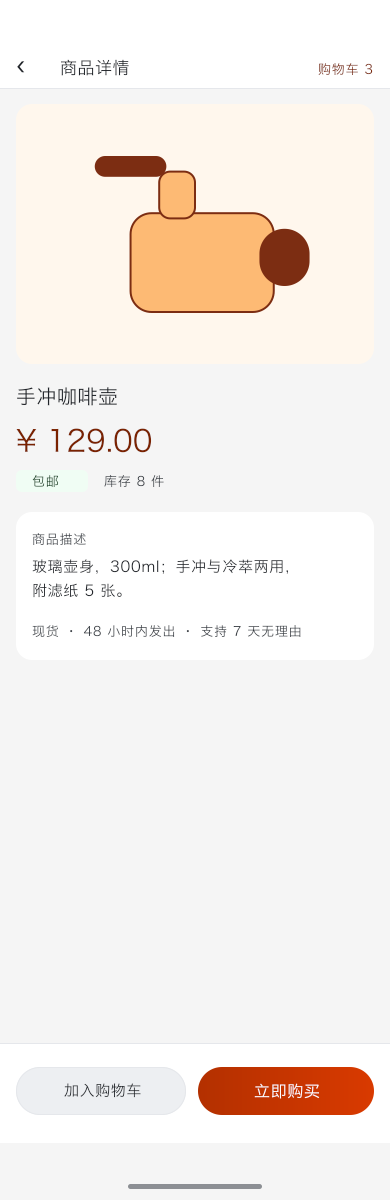
<style>
.page{position:relative;width:390px;height:1200px;background:#f5f5f5}
.page>*{position:absolute;margin:0}
.t1{font:24px "HiraginoSansGB-Regular";letter-spacing:0.022em;color:#1f2329}
.t2{font:17px "HiraginoSansGB-Regular";letter-spacing:0.03em;color:#1f2329}
.t3{font:13px "HiraginoSansGB-Regular";letter-spacing:0.06em;color:#7f2e12}
.t4{font:20px "HiraginoSansGB-Regular";letter-spacing:0.024em;color:#1f2329}
.t5{font:30px "HiraginoSansGB-Regular";color:#7a2200}
.t6{font:13px "HiraginoSansGB-Regular";letter-spacing:0.06em}
.t7{font:13px "HiraginoSansGB-Regular";letter-spacing:0.06em;color:#464b50}
.t8{font:15px "HiraginoSansGB-Regular";letter-spacing:0.04em;color:#282c31}
.t9{font:15px "HiraginoSansGB-Regular";letter-spacing:0.04em;color:#25282e}
.t10{font:13px "HiraginoSansGB-Regular";letter-spacing:0.06em;color:#3a4046}
.t11{font:15px "HiraginoSansGB-Regular";letter-spacing:0.04em;color:#292c32}
.t12{font:16px "HiraginoSansGB-Regular";letter-spacing:0.04em;color:#ffffff}
</style>
<div class="page">
<p class="t1" style="left:16px;top:61px;width:10px;height:13px">‹</p>
<p class="t2" style="left:60px;top:59px;width:70px;height:18px">商品详情</p>
<p class="t3" style="left:317px;top:63px;width:57px;height:14px">购物车 3</p>
<p class="t4" style="left:16px;top:387px;width:102px;height:20px">手冲咖啡壶</p>
<p class="t5" style="left:15px;top:428px;width:138px;height:26px">¥ 129.00</p>
<p class="t6" style="left:31px;top:474px;width:29px;height:14px">包邮</p>
<p class="t7" style="left:103px;top:474px;width:62px;height:15px">库存 8 件</p>
<p class="t6" style="left:31px;top:533px;width:56px;height:13px">商品描述</p>
<p class="t8" style="left:31px;top:559px;width:259px;height:16px">玻璃壶身，300ml；手冲与冷萃两用，</p>
<p class="t9" style="left:32px;top:583px;width:91px;height:16px">附滤纸 5 张。</p>
<p class="t10" style="left:31px;top:625px;width:271px;height:13px">现货 · 48 小时内发出 · 支持 7 天无理由</p>
<p class="t11" style="left:63px;top:1083px;width:79px;height:16px">加入购物车</p>
<p class="t12" style="left:253px;top:1083px;width:68px;height:17px">立即购买</p>
</div>
